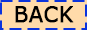
<style>
.page{position:relative;width:87px;height:30px;background:#ffdbaa}
.page>*{position:absolute;margin:0}
.t1{font:21px "Verdana";color:#000000;font-weight:bold}
</style>
<div class="page">
<p class="t1" style="left:15px;top:6px;width:59px;height:17px">BACK</p>
</div>
